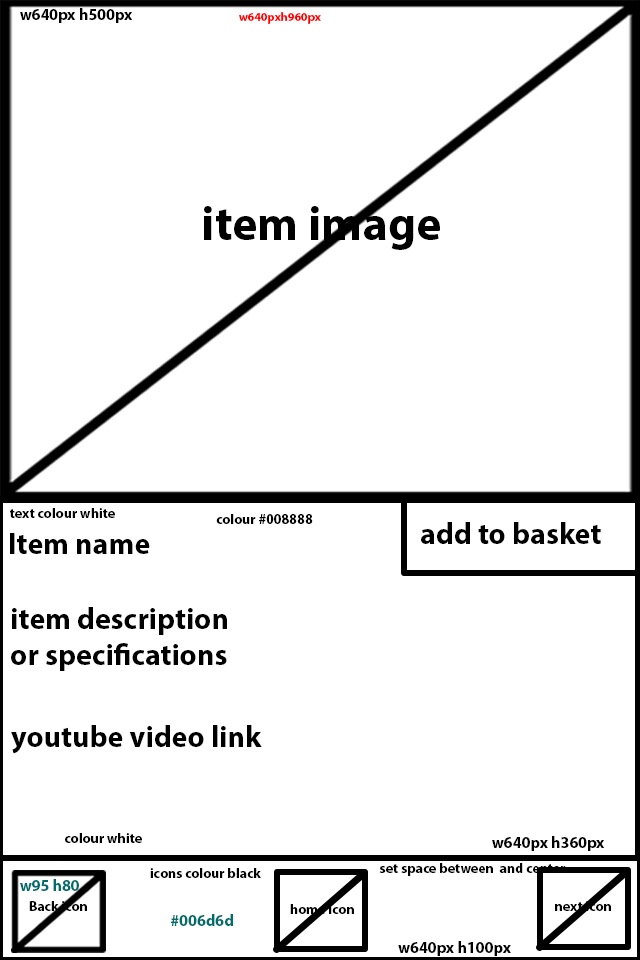
<style>
.page{position:relative;width:640px;height:960px;background:#ffffff}
.page>*{position:absolute;margin:0}
.t1{font:16px "MyriadPro-Bold";color:#000000}
.t2{font:12px "MyriadPro-Bold";color:#ff0000}
.t3{font:48px "MyriadPro-Bold";color:#000000}
.t4{font:14px "MyriadPro-Bold";color:#000000}
.t5{font:30px "MyriadPro-Bold";color:#000000}
.t6{font:16px "MyriadPro-Bold";color:#006d6d}
</style>
<div class="page">
<p class="t1" style="left:20px;top:8px;width:113px;height:15px">w640px h500px</p>
<p class="t2" style="left:239px;top:12px;width:82px;height:12px">w640pxh960px</p>
<p class="t3" style="left:204px;top:206px;width:236px;height:44px">item image</p>
<p class="t4" style="left:10px;top:508px;width:105px;height:10px">text colour white</p>
<p class="t4" style="left:216px;top:514px;width:97px;height:10px">colour #008888</p>
<p class="t5" style="left:10px;top:533px;width:140px;height:21px">Item name</p>
<p class="t5" style="left:421px;top:522px;width:180px;height:22px">add to basket</p>
<p class="t5" style="left:11px;top:607px;width:216px;height:64px">item description <br>or specifications</p>
<p class="t5" style="left:11px;top:725px;width:251px;height:29px">youtube video link</p>
<p class="t4" style="left:65px;top:833px;width:77px;height:10px">colour white</p>
<p class="t1" style="left:492px;top:836px;width:113px;height:15px">w640px h360px</p>
<p class="t4" style="left:150px;top:868px;width:111px;height:10px">icons colour black</p>
<p class="t4" style="left:379px;top:863px;width:187px;height:13px">set space between  and center</p>
<p class="t6" style="left:20px;top:879px;width:59px;height:12px">w95 h80</p>
<p class="t4" style="left:29px;top:901px;width:58px;height:10px">Back icon</p>
<p class="t4" style="left:290px;top:904px;width:64px;height:10px">home icon</p>
<p class="t4" style="left:555px;top:901px;width:56px;height:10px">next icon</p>
<p class="t6" style="left:171px;top:914px;width:62px;height:12px">#006d6d</p>
<p class="t1" style="left:398px;top:941px;width:113px;height:15px">w640px h100px</p>
</div>
